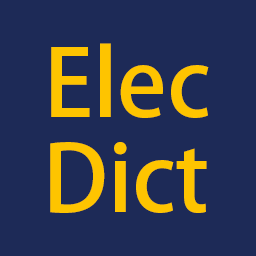
<style>
.page{position:relative;width:256px;height:256px;background:#1d2a57}
.page>*{position:absolute;margin:0}
.t1{font:91.7px "AdobeHeitiStd-Regular";color:#fec400}
</style>
<div class="page">
<p class="t1" style="left:51px;top:43px;width:158px;height:75px">Elec</p>
<p class="t1" style="left:50px;top:142px;width:157px;height:71px">Dict</p>
</div>
